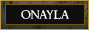
<style>
.page{position:relative;width:89px;height:30px;background:#0f0f0f}
.page>*{position:absolute;margin:0}
.t1{font:14px "RingbearerMedium";letter-spacing:0.005em;color:#fffffe}
</style>
<div class="page">
<p class="t1" style="left:21px;top:10px;width:49px;height:9px">onayla</p>
</div>
